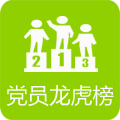
<style>
.page{position:relative;width:120px;height:120px;background:#90d000}
.page>*{position:absolute;margin:0}
.t1{font:21.6px "MicrosoftYaHei";color:#fafafa}
</style>
<div class="page">
<p class="t1" style="left:6px;top:85px;width:108px;height:21px">党员龙虎榜</p>
</div>
